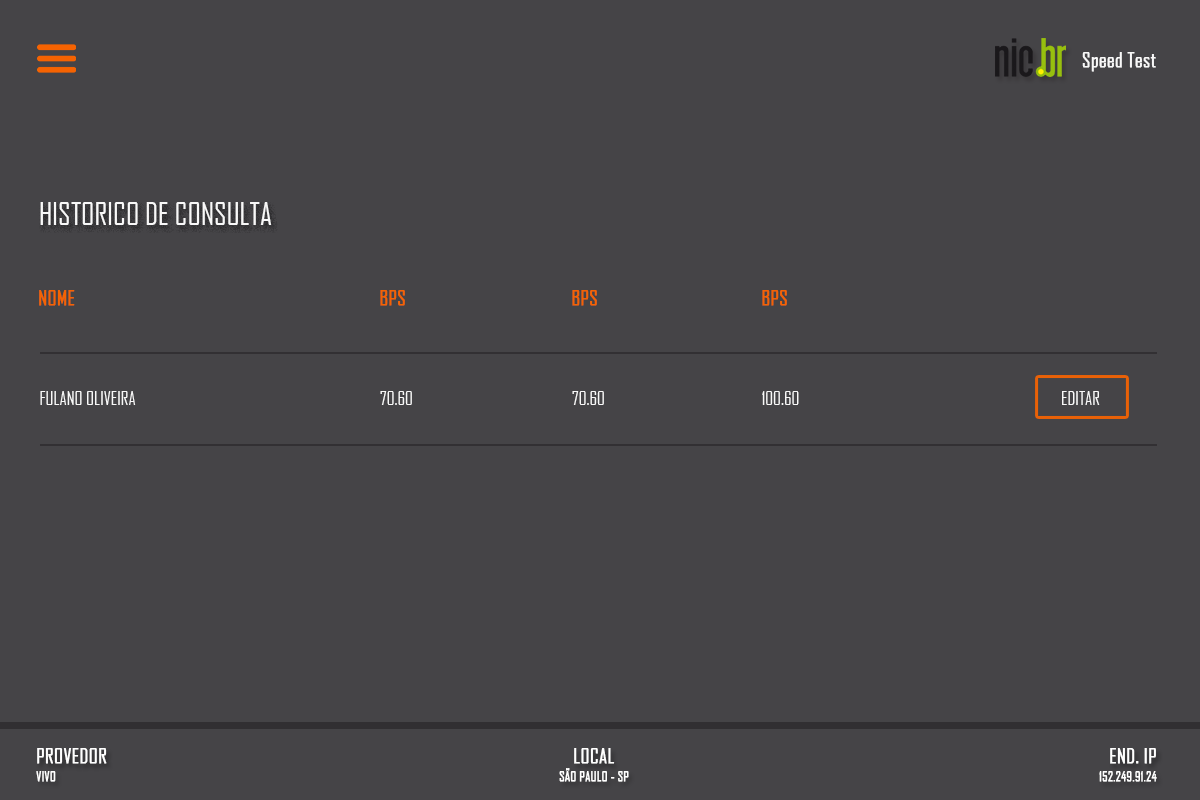
<style>
.page{position:relative;width:1200px;height:800px;background:#454447}
.page>*{position:absolute;margin:0}
.t1{font:20px "AgencyFB-Reg";color:#f8f8f8;font-weight:bold}
.t2{font:30px "AgencyFB-Reg";color:#f8f8f8;text-transform:uppercase}
.t3{font:20px "AgencyFB-Reg";color:#f56302;text-transform:uppercase;font-weight:bold}
.t4{font:18px "AgencyFB-Reg";color:#f8f8f8;text-transform:uppercase}
.t5{font:20px "AgencyFB-Reg";color:#ffffff;text-transform:uppercase;font-weight:bold}
.t6{font:13px "AgencyFB-Reg";color:#ffffff;text-transform:uppercase;font-weight:bold}
</style>
<div class="page">
<p class="t1" style="left:1082px;top:52px;width:74px;height:20px">Speed Test</p>
<p class="t2" style="left:40px;top:202px;width:232px;height:23px">HISTORICO DE CONSULTA</p>
<p class="t3" style="left:39px;top:290px;width:36px;height:16px">NOME</p>
<p class="t3" style="left:380px;top:290px;width:25px;height:16px">bps</p>
<p class="t3" style="left:572px;top:290px;width:25px;height:16px">bps</p>
<p class="t3" style="left:762px;top:290px;width:25px;height:16px">bps</p>
<p class="t4" style="left:40px;top:391px;width:96px;height:14px">Fulano Oliveira</p>
<p class="t4" style="left:380px;top:391px;width:32px;height:14px">70.60</p>
<p class="t4" style="left:572px;top:391px;width:32px;height:14px">70.60</p>
<p class="t4" style="left:762px;top:391px;width:37px;height:14px">100.60</p>
<p class="t4" style="left:1062px;top:391px;width:38px;height:14px">editar</p>
<p class="t5" style="left:37px;top:748px;width:70px;height:16px">Provedor</p>
<p class="t5" style="left:574px;top:748px;width:41px;height:16px">Local</p>
<p class="t5" style="left:1110px;top:748px;width:46px;height:16px">End. ip</p>
<p class="t6" style="left:36px;top:771px;width:20px;height:11px">vivo</p>
<p class="t6" style="left:559px;top:768px;width:70px;height:14px">São paulo - sp</p>
<p class="t6" style="left:1099px;top:771px;width:58px;height:11px">152.249.91.24</p>
</div>
